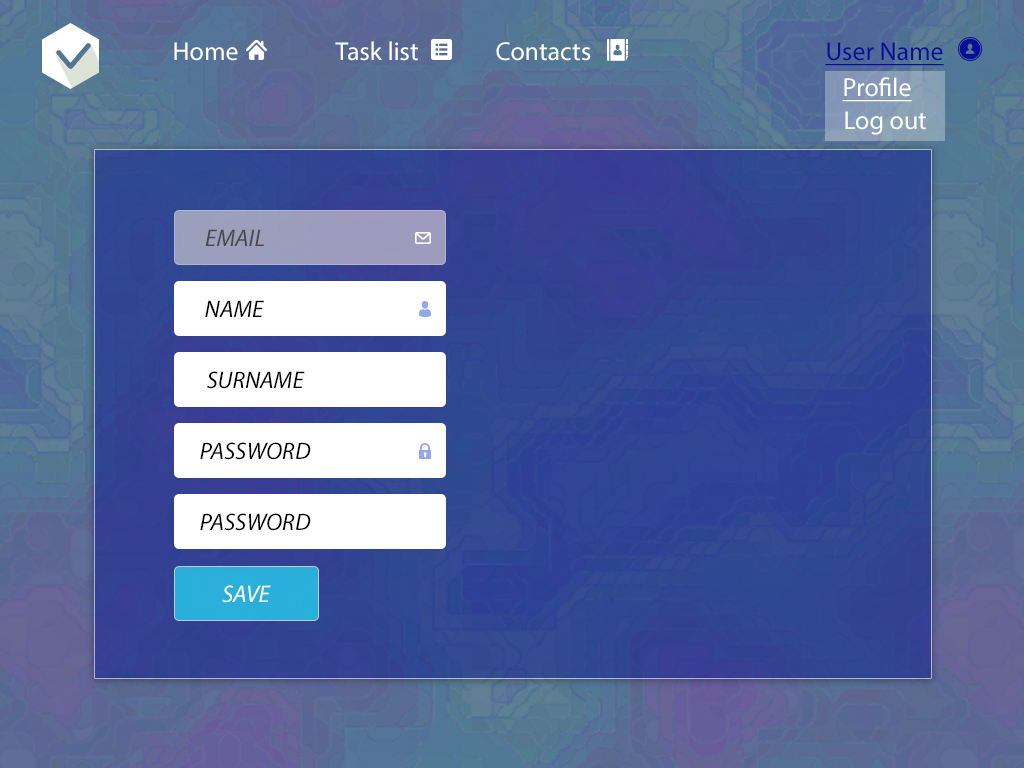
<style>
.page{position:relative;width:1024px;height:768px}
.page>*{position:absolute;margin:0}
.t1{font:26px "MyriadPro-Regular";color:#ffffff}
.t2{font:26px "MyriadPro-Regular";color:#060e9a;text-decoration:underline}
.t3{font:26px "MyriadPro-Regular";color:#ffffff;text-decoration:underline}
.t4{font:24px "MyriadPro-It";color:#4b4747}
.t5{font:24px "MyriadPro-It";color:#000000}
.t6{font:24px "MyriadPro-It";color:#ffffff}
</style>
<div class="page">
<p class="t1" style="left:335px;top:41px;width:83px;height:20px">Task list</p>
<p class="t1" style="left:174px;top:42px;width:64px;height:19px">Home</p>
<p class="t1" style="left:496px;top:42px;width:95px;height:19px">Contacts</p>
<p class="t2" style="left:825px;top:42px;width:119px;height:24px">User Name</p>
<p class="t3" style="left:842px;top:77px;width:70px;height:25px">Profile</p>
<p class="t1" style="left:845px;top:111px;width:81px;height:24px">Log out</p>
<p class="t4" style="left:205px;top:229px;width:59px;height:17px">EMAIL</p>
<p class="t5" style="left:205px;top:300px;width:59px;height:17px">NAME</p>
<p class="t5" style="left:207px;top:371px;width:98px;height:18px">SURNAME</p>
<p class="t5" style="left:200px;top:442px;width:111px;height:18px">PASSWORD</p>
<p class="t5" style="left:200px;top:513px;width:111px;height:18px">PASSWORD</p>
<p class="t6" style="left:222px;top:585px;width:49px;height:18px">SAVE</p>
</div>
